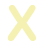
<style>
.page{position:relative;width:45px;height:45px;background:#ffffff}
.page>*{position:absolute;margin:0}
.t1{font:50px "ArialRoundedMTBold";color:#f4f1b2}
</style>
<div class="page">
<p class="t1" style="left:7px;top:5px;width:30px;height:36px">X</p>
</div>
